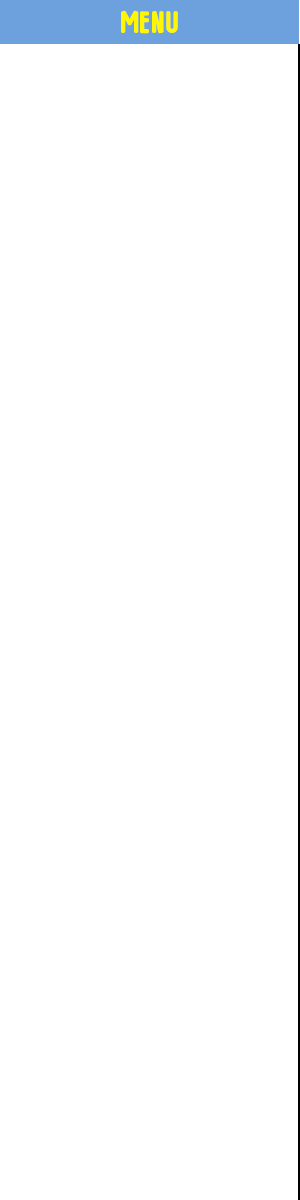
<style>
.page{position:relative;width:300px;height:1200px;background:#ffffff}
.page>*{position:absolute;margin:0}
.t1{font:35px "HSSaemaul";color:#fff600}
.t2{font:35px "HSSaemaul";letter-spacing:0.05em;color:#fff600}
</style>
<div class="page">
<p class="t1" style="left:121px;top:10px;width:57px;height:24px">ME<span class="t2">NU</span></p>
</div>
